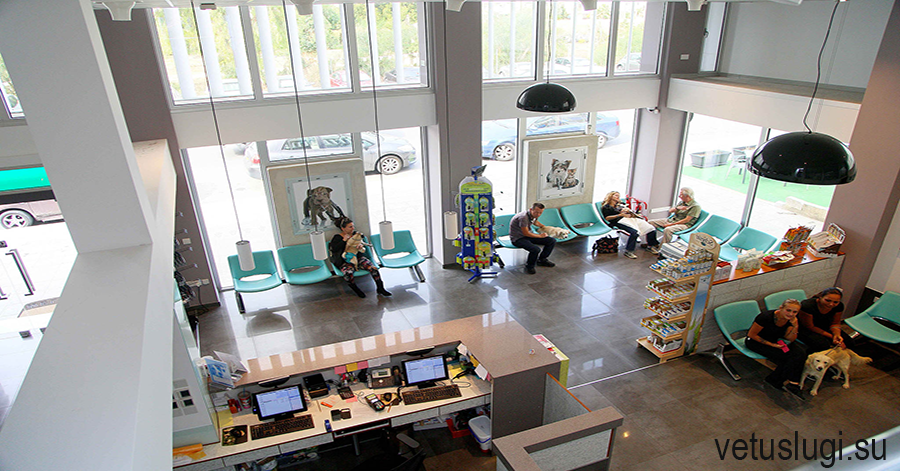
<style>
.page{position:relative;width:900px;height:471px}
.page>*{position:absolute;margin:0}
.t1{font:40px "ArialNarrow";letter-spacing:0.002em;color:#121314}
</style>
<div class="page">
<p class="t1" style="left:714px;top:431px;width:172px;height:37px">vetuslugi.su</p>
</div>
